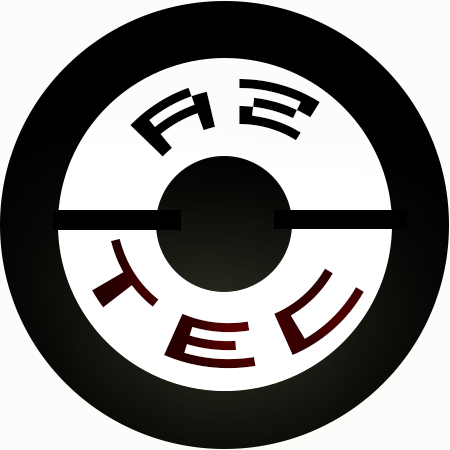
<style>
.page{position:relative;width:450px;height:450px}
.page>*{position:absolute;margin:0}
.t1{font:72px "VirtualDJ";letter-spacing:0.01em;color:#000000}
.t2{font:72px "VirtualDJ";letter-spacing:0.01em;color:#360000}
</style>
<div class="page">
<p class="t1" style="left:130px;top:79px;width:190px;height:78px">AZ</p>
<p class="t2" style="left:92px;top:238px;width:272px;height:131px;text-align:center">TEC</p>
</div>
